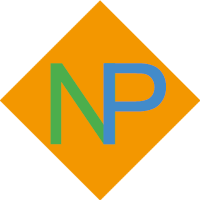
<style>
.page{position:relative;width:200px;height:200px;background:#ffffff}
.page>*{position:absolute;margin:0}
.t1{font:112.2px "ArialMT";color:#4cae4c;font-weight:bold}
.t2{font:112.2px "ArialMT";color:#428bca;font-weight:bold}
</style>
<div class="page">
<p class="t1" style="left:50px;top:63px;width:66px;height:82px">N</p>
<p class="t2" style="left:103px;top:63px;width:63px;height:82px">P</p>
</div>
